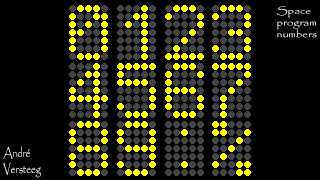
<style>
.page{position:relative;width:320px;height:180px;background:#000000}
.page>*{position:absolute;margin:0}
.t1{font:9.8px "Papyrus-Regular";scale:1.17 1}
.t2{font:13.3px "Papyrus-Regular";color:#ffffff;scale:0.71 1}
</style>
<div class="page">
<p class="t1" style="left:276px;top:6px;width:41px;height:32px">Space <br>program<br>numbers</p>
<p class="t2" style="left:3px;top:146px;width:38px;height:32px">André<br>Versteeg</p>
</div>
